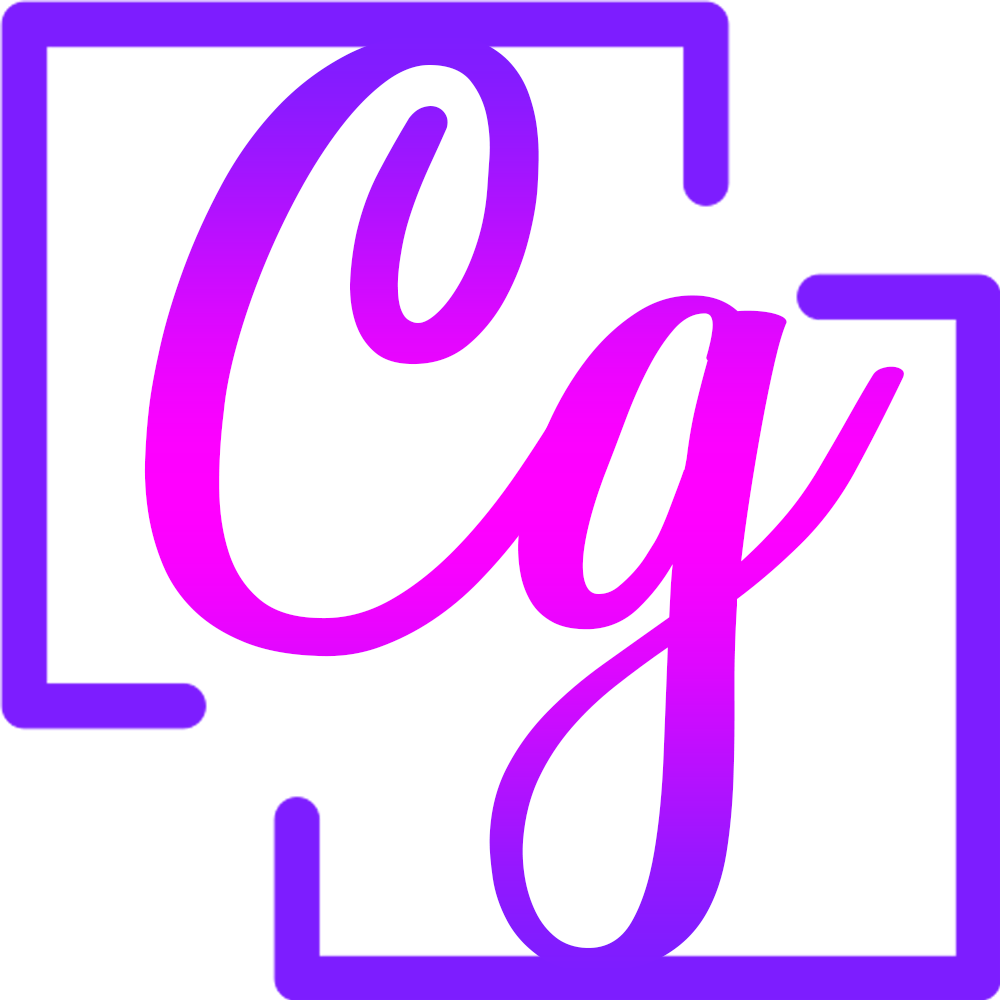
<style>
.page{position:relative;width:1000px;height:1000px;background:#ffffff}
.page>*{position:absolute;margin:0}
.t1{font:699.4px "HoneymoonPersonalUse"}
</style>
<div class="page">
<p class="t1" style="left:144px;top:33px;width:760px;height:939px">Cg</p>
</div>
